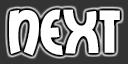
<style>
.page{position:relative;width:128px;height:64px;background:#ffffff}
.page>*{position:absolute;margin:0}
.t1{font:60px "MailRayStuff";color:#ffffff}
</style>
<div class="page">
<p class="t1" style="left:9px;top:9px;width:111px;height:47px">NEXT</p>
</div>
